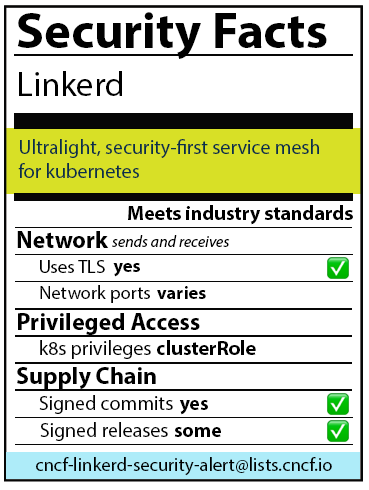
<style>
.page{position:relative;width:369px;height:490px;background:#ffffff}
.page>*{position:absolute;margin:0}
.t1{font:50.7px "MyriadPro-Bold";color:#000000}
.t2{font:34.7px "MyriadPro-Regular";color:#000000}
.t3{font:20px "MyriadPro-Regular";color:#0a2f49}
.t4{font:20px "MyriadPro-Bold";color:#000000}
.t5{font:24px "MyriadPro-Bold";color:#000000}
.t6{font:16px "MyriadPro-It";color:#000000}
.t7{font:18.7px "MyriadPro-Regular";color:#000000}
.t8{font:18.7px "MyriadPro-Bold";color:#000000}
.t9{font:20px "MyriadPro-Regular";color:#000000}
</style>
<div class="page">
<p class="t1" style="left:17px;top:12px;width:310px;height:47px">Security Facts</p>
<p class="t2" style="left:19px;top:71px;width:103px;height:25px">Linkerd</p>
<p class="t3" style="left:18px;top:139px;width:301px;height:39px">Ultralight, security-first service mesh<br>for kubernetes</p>
<p class="t4" style="left:128px;top:205px;width:225px;height:20px">Meets industry standards</p>
<p class="t5" style="left:17px;top:231px;width:92px;height:17px">Network</p>
<p class="t6" style="left:112px;top:235px;width:118px;height:12px">sends and receives</p>
<p class="t7" style="left:40px;top:260px;width:65px;height:13px">Uses TLS</p>
<p class="t8" style="left:113px;top:263px;width:27px;height:14px">yes</p>
<p class="t7" style="left:40px;top:285px;width:110px;height:18px">Network ports</p>
<p class="t8" style="left:157px;top:286px;width:49px;height:13px">varies</p>
<p class="t5" style="left:18px;top:313px;width:182px;height:22px">Privileged Access</p>
<p class="t9" style="left:40px;top:340px;width:111px;height:19px">k8s privileges</p>
<p class="t4" style="left:157px;top:340px;width:99px;height:15px">clusterRole</p>
<p class="t5" style="left:17px;top:367px;width:139px;height:22px">Supply Chain</p>
<p class="t9" style="left:39px;top:395px;width:134px;height:19px">Signed commits</p>
<p class="t4" style="left:179px;top:400px;width:29px;height:15px">yes</p>
<p class="t9" style="left:40px;top:422px;width:128px;height:19px">Signed releases</p>
<p class="t4" style="left:174px;top:427px;width:47px;height:10px">some</p>
<p class="t7" style="left:36px;top:457px;width:296px;height:19px">cncf-linkerd-security-alert@lists.cncf.io</p>
</div>
